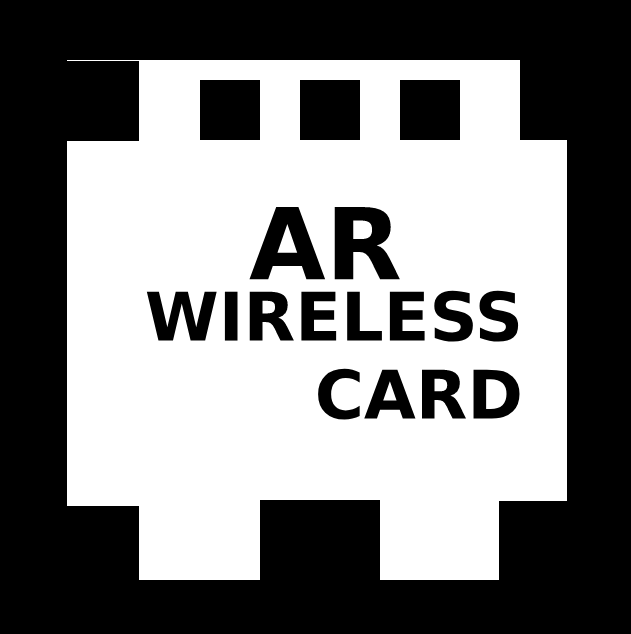
<style>
.page{position:relative;width:631px;height:634px;background:#ffffff}
.page>*{position:absolute;margin:0}
.t1{font:99px "DejaVuSans-Bold";color:#000000}
.t2{font:67px "DejaVuSans-Bold";color:#000000}
</style>
<div class="page">
<p class="t1" style="left:249px;top:207px;width:151px;height:73px">AR</p>
<p class="t2" style="left:146px;top:290px;width:374px;height:130px;text-align:right">WIRELESS<br>CARD</p>
</div>
